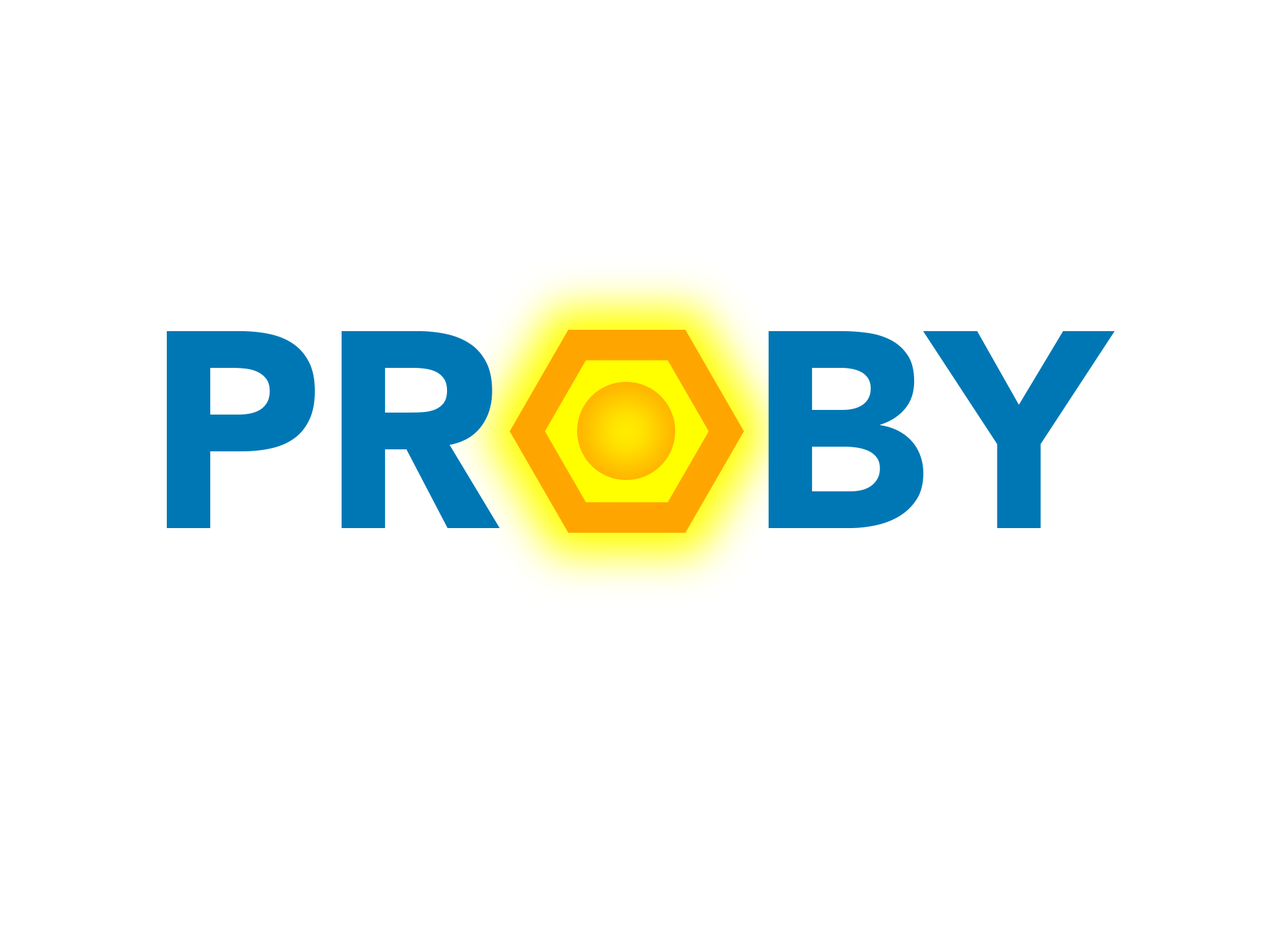
<style>
.page{position:relative;width:1261px;height:946px;background:#ffffff}
.page>*{position:absolute;margin:0}
.t1{font:278px "Avenir-Black";color:#0077b5}
</style>
<div class="page">
<p class="t1" style="left:167px;top:331px;width:948px;height:197px">PR   BY</p>
</div>
